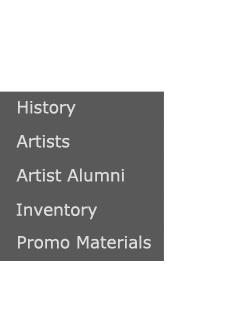
<style>
.page{position:relative;width:240px;height:320px;background:#ffffff}
.page>*{position:absolute;margin:0}
.t1{font:16.7px "Verdana";color:#dcdcdc}
</style>
<div class="page">
<p class="t1" style="left:18px;top:101px;width:58px;height:16px">History</p>
<p class="t1" style="left:16px;top:135px;width:54px;height:13px">Artists</p>
<p class="t1" style="left:16px;top:168px;width:108px;height:14px">Artist Alumni</p>
<p class="t1" style="left:16px;top:203px;width:81px;height:17px">Inventory</p>
<p class="t1" style="left:18px;top:235px;width:133px;height:14px">Promo Materials</p>
</div>
